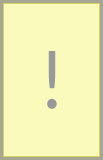
<style>
.page{position:relative;width:103px;height:160px;background:#fafabd}
.page>*{position:absolute;margin:0}
.t1{font:80px "Lato-Regular";color:#999999;scale:0.95 1}
</style>
<div class="page">
<p class="t1" style="left:47px;top:51px;width:10px;height:58px">!</p>
</div>
